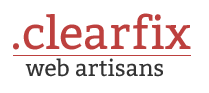
<style>
.page{position:relative;width:209px;height:93px;background:#ffffff}
.page>*{position:absolute;margin:0}
.t1{font:22.7px "Bitter-Regular";color:#333333}
.t2{font:45.5px "Bitter-Regular";color:#bd403e}
</style>
<div class="page">
<p class="t1" style="left:13px;top:13px;width:178px;height:64px"><span class="t2">.clearfix<br></span>   web artisans</p>
</div>
